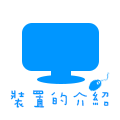
<style>
.page{position:relative;width:120px;height:120px;background:#ffffff}
.page>*{position:absolute;margin:0}
.t1{font:20.8px "DFEr-W4-WIN-BF";color:#0096ff}
</style>
<div class="page">
<p class="t1" style="left:10px;top:90px;width:99px;height:18px">裝置的介紹</p>
</div>
